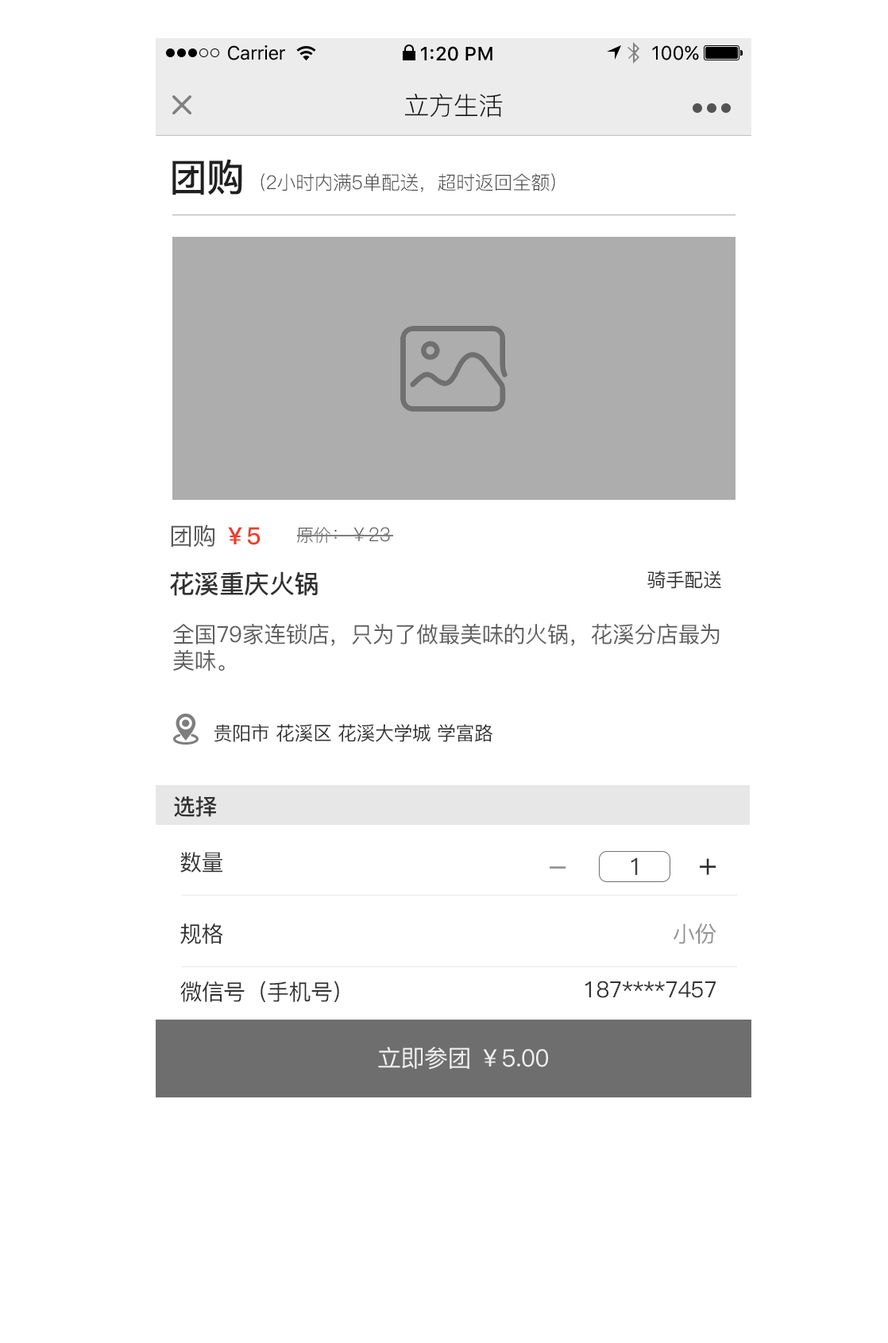
<style>
.page{position:relative;width:888px;height:1343px;background:#ffffff}
.page>*{position:absolute;margin:0}
.t1{font:19.1px "SFUIText-Regular";letter-spacing:-0.025em;color:#000000}
.t2{font:19.1px "SFUIText-Medium";color:#000000}
.t3{font:19.1px "SFUIText-Regular";color:#000000}
.t4{font:25.4px "PingFang-SC-Regular";letter-spacing:-0.02em;color:#141414}
.t5{font:38.1px "PingFang-SC-Bold";letter-spacing:-0.02em;color:#212020}
.t6{font:19.1px "PingFang-SC-Regular";letter-spacing:-0.02em;color:#4f4d4d}
.t7{font:23.8px "PingFang-SC-Medium";letter-spacing:-0.02em;color:#595959}
.t8{font:23.8px "PingFang-SC-Bold";letter-spacing:-0.02em;color:#f33b28}
.t9{font:19.1px "PingFang-SC-Regular";letter-spacing:-0.02em;color:#5d5d5d}
.t10{font:17.5px "PingFang-SC-Regular";letter-spacing:-0.02em;color:#5d5d5d}
.t11{font:25.4px "PingFang-SC-Bold";letter-spacing:-0.02em;color:#323131}
.t12{font:19.1px "PingFang-SC-Medium";letter-spacing:-0.02em;color:#323131}
.t13{font:22.2px/26.2px "PingFang-SC-Medium";letter-spacing:-0.02em;color:#5d5d5d}
.t14{font:22.2px "PingFang-SC-Bold";letter-spacing:-0.02em;color:#323131}
.t15{font:22.2px "PingFang-SC-Medium";letter-spacing:-0.02em;color:#323131}
.t16{font:23.8px "PingFang-SC-Medium";letter-spacing:-0.02em;color:#404040}
.t17{font:31.8px "PingFang-SC-Medium";letter-spacing:-0.02em;color:#323131}
.t18{font:31.8px "PingFang-SC-Medium";letter-spacing:-0.02em;color:#949494}
.t19{font:22.2px "PingFang-SC-Medium";letter-spacing:-0.02em;color:#949494}
.t20{font:23.8px "PingFang-SC-Medium";letter-spacing:-0.02em;color:#efefef}
</style>
<div class="page">
<p class="t1" style="left:228px;top:45px;width:57px;height:15px">Carrier</p>
<p class="t2" style="left:421px;top:46px;width:72px;height:15px">1:20 PM</p>
<p class="t3" style="left:652px;top:45px;width:47px;height:15px">100%</p>
<p class="t4" style="left:405px;top:93px;width:98px;height:25px">立方生活</p>
<p class="t5" style="left:172px;top:159px;width:70px;height:36px">团购</p>
<p class="t6" style="left:261px;top:173px;width:294px;height:19px">(2小时内满5单配送，超时返回全额）</p>
<p class="t7" style="left:171px;top:524px;width:90px;height:23px">团购 <span class="t8">￥5</span></p>
<p class="t9" style="left:297px;top:527px;width:93px;height:16px"><span class="t10">原价</span>：￥23</p>
<p class="t11" style="left:170px;top:571px;width:148px;height:25px">花溪重庆火锅</p>
<p class="t12" style="left:647px;top:570px;width:74px;height:19px">骑手配送</p>
<p class="t13" style="left:173px;top:624px;width:547px;height:46px">全国79家连锁店，只为了做最美味的火锅，花溪分店最为<br>美味。</p>
<p class="t12" style="left:214px;top:724px;width:279px;height:18px">贵阳市 花溪区 花溪大学城 学富路</p>
<p class="t14" style="left:174px;top:796px;width:43px;height:21px">选择</p>
<p class="t15" style="left:180px;top:852px;width:42px;height:20px">数量</p>
<p class="t16" style="left:631px;top:857px;width:7px;height:18px">1</p>
<p class="t17" style="left:700px;top:858px;width:17px;height:17px">+</p>
<p class="t18" style="left:550px;top:866px;width:16px;height:2px">-</p>
<p class="t15" style="left:180px;top:923px;width:43px;height:21px">规格</p>
<p class="t19" style="left:674px;top:923px;width:43px;height:21px">小份</p>
<p class="t15" style="left:180px;top:980px;width:159px;height:22px">微信号（手机号）</p>
<p class="t15" style="left:585px;top:980px;width:131px;height:18px">187****7457</p>
<p class="t20" style="left:378px;top:1046px;width:170px;height:23px">立即参团 ￥5.00</p>
</div>
